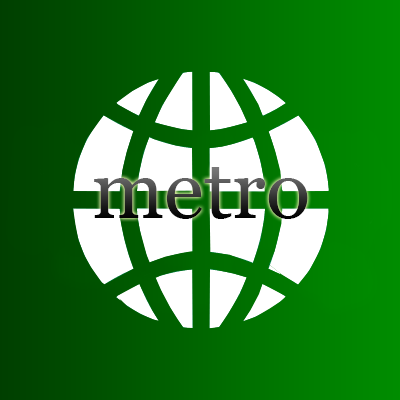
<style>
.page{position:relative;width:400px;height:400px}
.page>*{position:absolute;margin:0}
.t1{font:82px "Georgia"}
</style>
<div class="page">
<p class="t1" style="left:94px;top:167px;width:214px;height:52px">metro</p>
</div>
